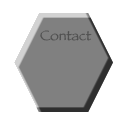
<style>
.page{position:relative;width:126px;height:126px;background:#ffffff}
.page>*{position:absolute;margin:0}
.t1{font:14px "Papyrus";color:#4f4f4f}
</style>
<div class="page">
<p class="t1" style="left:40px;top:30px;width:52px;height:11px">Contact</p>
</div>
